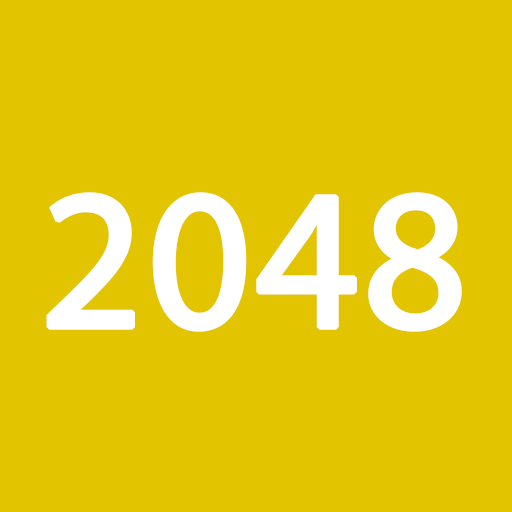
<style>
.page{position:relative;width:512px;height:512px;background:#e2c400}
.page>*{position:absolute;margin:0}
.t1{font:200px "MyriadPro-Regular";color:#ffffff;font-weight:bold}
</style>
<div class="page">
<p class="t1" style="left:46px;top:192px;width:416px;height:140px">2048</p>
</div>
